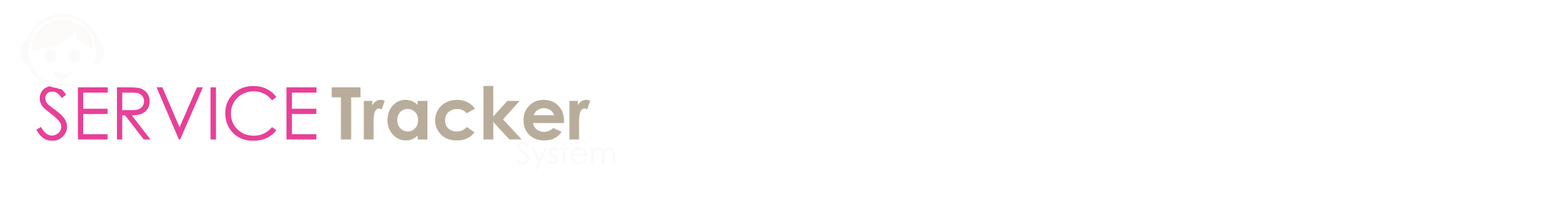
<style>
.page{position:relative;width:1568px;height:197px;background:#ffffff}
.page>*{position:absolute;margin:0}
.t1{font:72.4px "CenturyGothic";color:#e74098}
.t2{font:72.4px "CenturyGothic-Bold";color:#b8ad9b}
.t3{font:30.1px "CenturyGothic";color:#fbf9f9}
</style>
<div class="page">
<p class="t1" style="left:36px;top:86px;width:280px;height:55px">SERVICE</p>
<p class="t2" style="left:332px;top:86px;width:258px;height:54px">Tracker</p>
<p class="t3" style="left:516px;top:141px;width:100px;height:29px">System</p>
</div>
